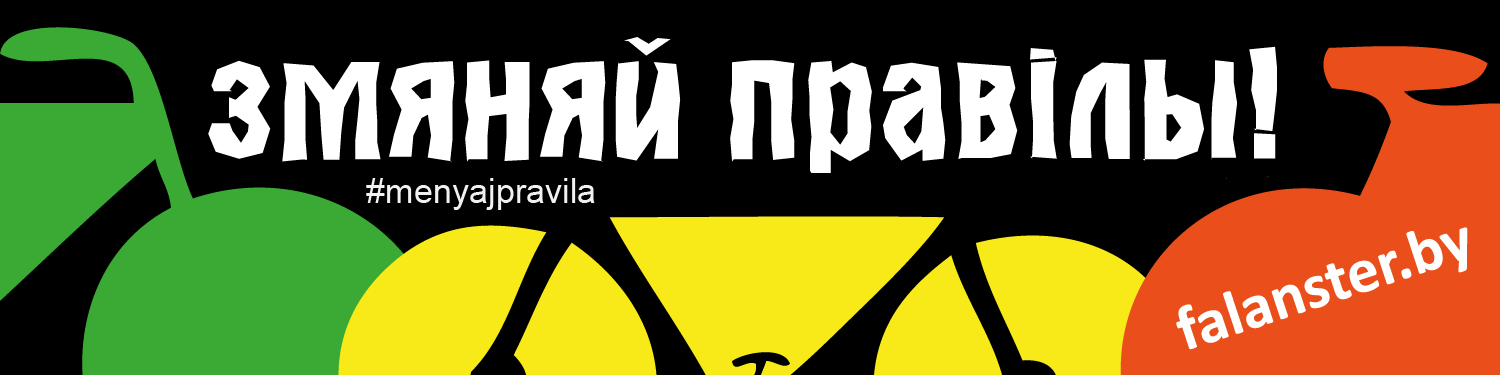
<style>
.page{position:relative;width:1500px;height:375px;background:#000000}
.page>*{position:absolute;margin:0}
.t1{font:157.4px "a_AlternaBrk";color:#ffffff}
.t2{font:34.3px "ArialMT";color:#f1f1f2}
</style>
<div class="page">
<p class="t1" style="left:208px;top:37px;width:1069px;height:136px">змяняй правiлы!</p>
<p class="t2" style="left:366px;top:178px;width:229px;height:32px">#menyajpravila</p>
</div>
